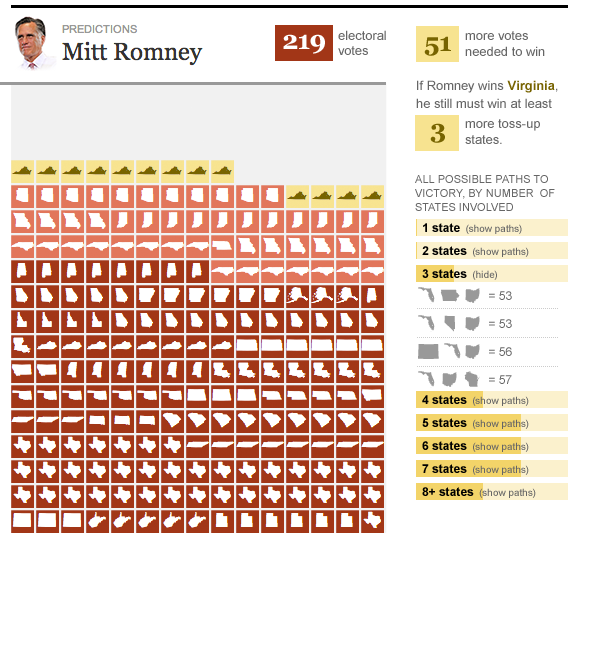
<style>
.page{position:relative;width:595px;height:671px;background:#ffffff}
.page>*{position:absolute;margin:0}
.t1{font:13px/15px "ArialMT";color:#666666}
.t2{font:26px "Georgia-Bold";color:#ffffff}
.t3{font:26px "Georgia-Bold";color:#776400}
.t4{font:13px/16px "ArialMT";color:#666666}
.t5{font:13px/18px "ArialMT";color:#666666}
.t6{font:13px/18px "Arial-BoldMT";color:#776300}
.t7{font:11px/14px "ArialMT";color:#666666;text-transform:uppercase}
.t8{font:10px/12px "ArialMT";color:#666666}
.t9{font:12px/12px "Arial-BoldMT";color:#000000}
.t10{font:12px/12px "Arial-BoldMT";color:#000000;text-transform:uppercase}
.t11{font:20px/12px "StateFace-Regular";color:#999999}
.t12{font:12px/12px "ArialMT";color:#666666}
</style>
<div class="page">
<p class="t1" style="left:338px;top:30px;width:48px;height:25px">electoral<br>votes</p>
<p class="t2" style="left:283px;top:34px;width:42px;height:20px">219</p>
<p class="t3" style="left:424px;top:36px;width:27px;height:20px">51</p>
<p class="t4" style="left:465px;top:31px;width:80px;height:25px">more votes<br>needed to win</p>
<p class="t5" style="left:416px;top:80px;width:142px;height:28px">If Romney wins <span class="t6">Virginia</span>, he still must win at least</p>
<p class="t3" style="left:430px;top:123px;width:15px;height:20px">3</p>
<p class="t4" style="left:465px;top:119px;width:75px;height:25px">more toss-up<br>states.</p>
<p class="t7" style="left:415px;top:175px;width:140px;height:36px">All possible paths to<br>victory, BY NUMBER  OF <br>STATES INVOLVED</p>
<p class="t8" style="left:422px;top:223px;width:114px;height:275px"><span class="t9">1 state</span>  (show paths)<br><span class="t10">2</span><span class="t9"> states</span>  (show paths)<br><span class="t10">3</span><span class="t9"> states</span>  (hide)<br><span class="t10">4</span><span class="t9"> states</span>  (show paths)<br><span class="t10">5</span><span class="t9"> states</span>  (show paths)<br><span class="t10">6</span><span class="t9"> states</span>  (show paths)<br><span class="t10">7</span><span class="t9"> states</span>  (show paths)<br><span class="t10">8+</span><span class="t9"> states</span>  (show paths)</p>
<p class="t11" style="left:418px;top:287px;width:62px;height:101px;text-align:justify">ILi<br>Igi<br>FIi<br>Iiv</p>
<p class="t12" style="left:489px;top:291px;width:23px;height:93px">= 53<br>= 53<br>= 56<br>= 57</p>
</div>
